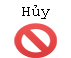
<style>
.page{position:relative;width:71px;height:58px;background:#ffffff}
.page>*{position:absolute;margin:0}
.t1{font:12px "CourierNewPSMT";color:#000000}
</style>
<div class="page">
<p class="t1" style="left:22px;top:5px;width:28px;height:14px">Hủy</p>
</div>
